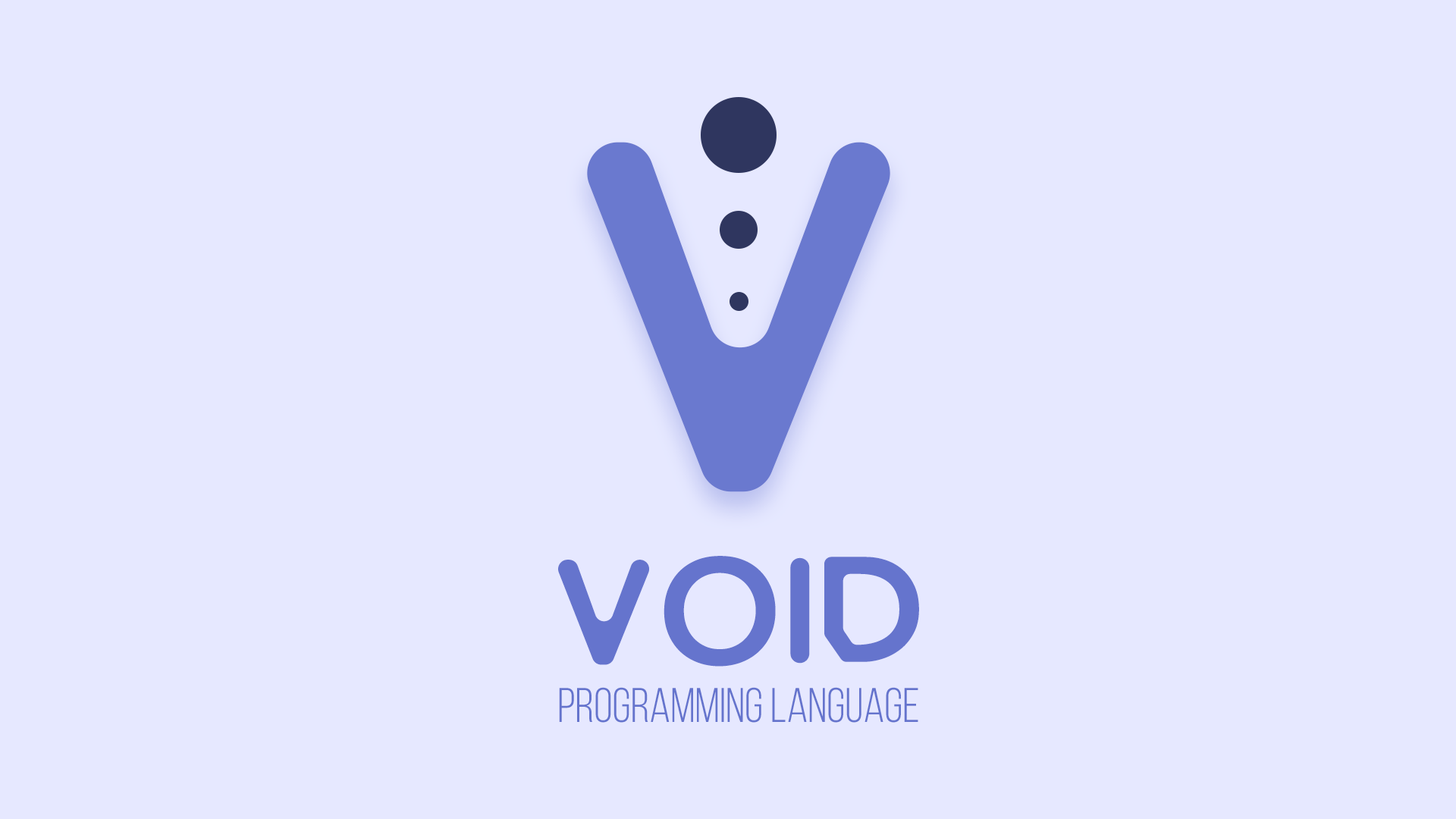
<style>
.page{position:relative;width:1456px;height:819px;background:#e6e8ff}
.page>*{position:absolute;margin:0}
.t1{font:505.5px "RivieraRegular";color:#6574cd}
.t2{font:48.5px "BebasNeueBook";color:#6574cd}
.t3{font:151.6px "RivieraRegular";color:#6574cd}
</style>
<div class="page">
<p class="t1" style="left:587px;top:142px;width:303px;height:350px;opacity:0.97">V</p>
<p class="t2" style="left:558px;top:556px;width:361px;height:167px;text-align:center"><span class="t3">VOID<br></span>programming language</p>
</div>
